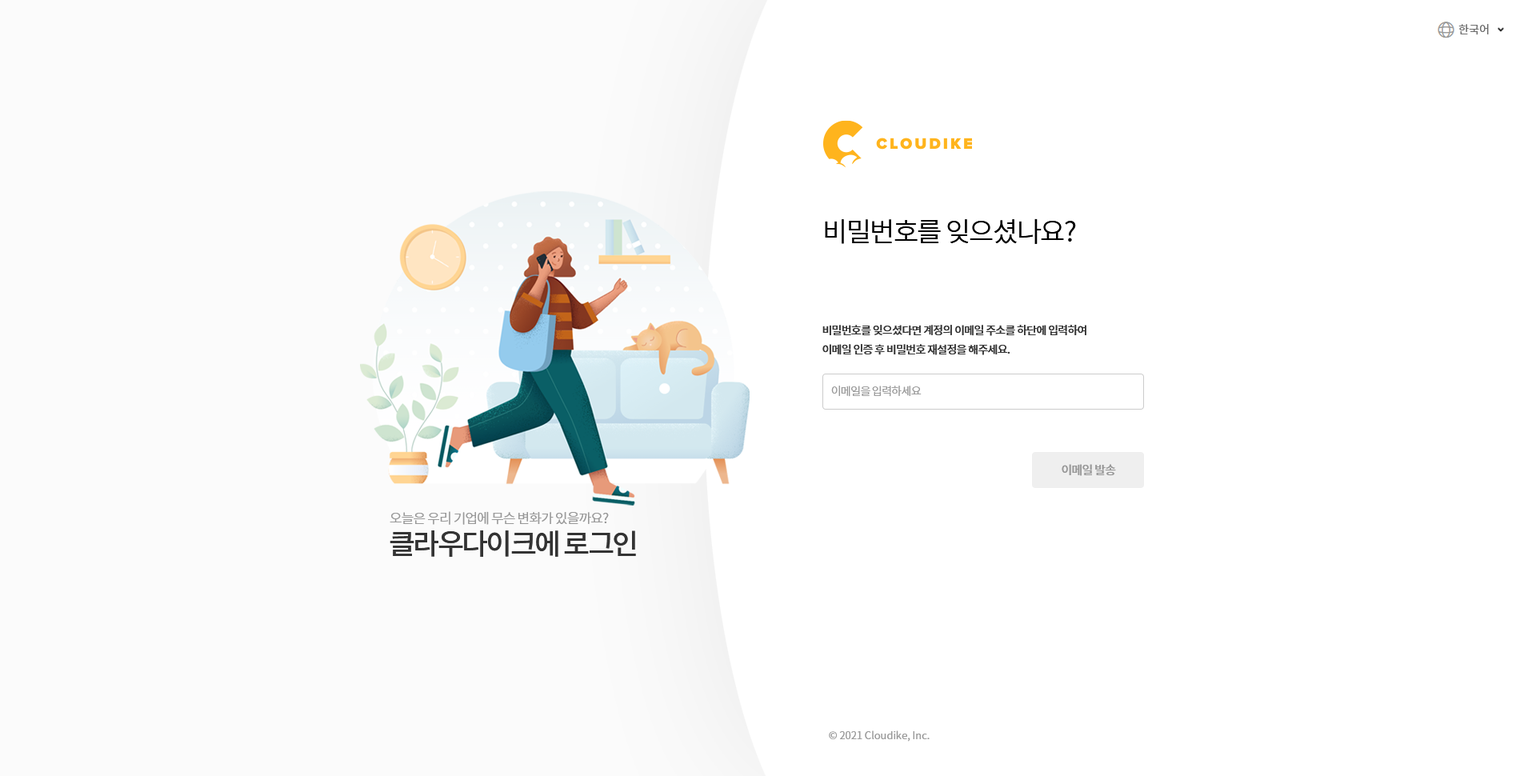
<style>
.page{position:relative;width:1536px;height:776px;background:#ffffff}
.page>*{position:absolute;margin:0}
.t1{font:11.2px "NotoSansCJKkr-DemiLight";color:#666666}
.t2{font:27.2px "NotoSansCJKkr-DemiLight";letter-spacing:-0.05em;color:#000000}
.t3{font:11.2px/19.2px "NotoSansCJKkr-Medium";letter-spacing:-0.05em;color:#333333}
.t4{font:11.2px "NotoSansCJKkr-DemiLight";letter-spacing:-0.05em;color:#999999}
.t5{font:12px "NotoSansCJKkr-Medium";letter-spacing:-0.05em;color:#999999}
.t6{font:13.6px "NotoSansCJKkr-DemiLight";letter-spacing:-0.05em;color:#999999}
.t7{font:28.8px "NotoSansCJKkr-Medium";letter-spacing:-0.075em;color:#333333}
.t8{font:10.4px "NotoSansCJKkr-DemiLight";color:#999999}
</style>
<div class="page">
<p class="t1" style="left:1459px;top:24px;width:30px;height:11px">한국어</p>
<p class="t2" style="left:825px;top:218px;width:251px;height:26px">비밀번호를 잊으셨나요?</p>
<p class="t3" style="left:823px;top:325px;width:264px;height:30px">비밀번호를 잊으셨다면 계정의 이메일 주소를 하단에 입력하여<br>이메일 인증 후 비밀번호 재설정을 해주세요.</p>
<p class="t4" style="left:831px;top:386px;width:91px;height:11px">이메일을 입력하세요</p>
<p class="t5" style="left:1062px;top:464px;width:54px;height:12px">이메일 발송</p>
<p class="t6" style="left:390px;top:511px;width:219px;height:14px">오늘은 우리 기업에 무슨 변화가 있을까요?</p>
<p class="t7" style="left:390px;top:531px;width:246px;height:26px">클라우다이크에 로그인</p>
<p class="t8" style="left:829px;top:731px;width:101px;height:11px">© 2021 Cloudike, Inc.</p>
</div>
